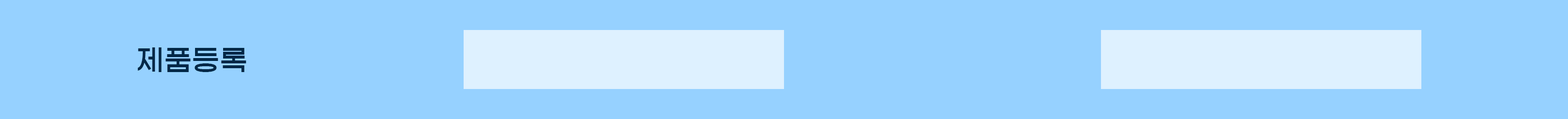
<style>
.page{position:relative;width:1568px;height:119px;background:#96d1ff}
.page>*{position:absolute;margin:0}
.t1{font:29px "GmarketSansTTFMedium";color:#012847}
</style>
<div class="page">
<p class="t1" style="left:137px;top:47px;width:109px;height:25px">제품등록</p>
</div>
